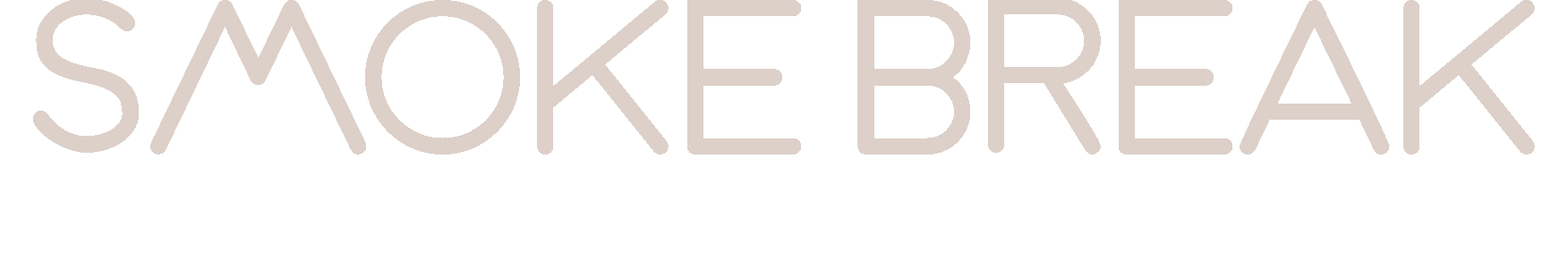
<style>
.page{position:relative;width:1568px;height:268px;background:#ffffff}
.page>*{position:absolute;margin:0}
.t1{font:226.7px "Amazonas";color:#dacdc6}
</style>
<div class="page">
<p class="t1" style="left:33px;top:0px;width:1502px;height:155px;opacity:0.95">SMOKE BREAK</p>
</div>
